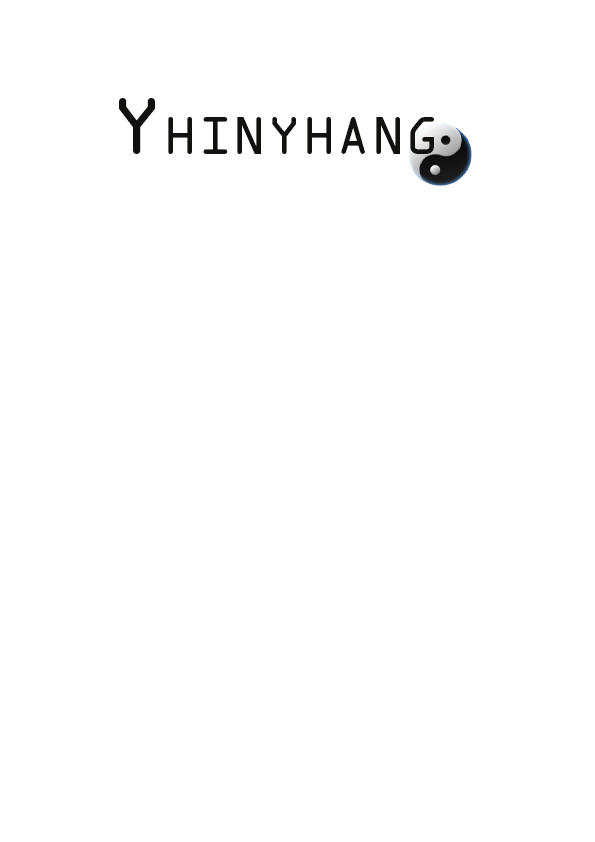
<style>
.page{position:relative;width:595px;height:842px;background:#ffffff}
.page>*{position:absolute;margin:0}
.t1{font:48px "OCRAStd";color:#111110}
.t2{font:72px "OCRAStd";color:#111110}
</style>
<div class="page">
<p class="t1" style="left:119px;top:98px;width:315px;height:56px"><span class="t2">Y</span>HINYHANG</p>
</div>
